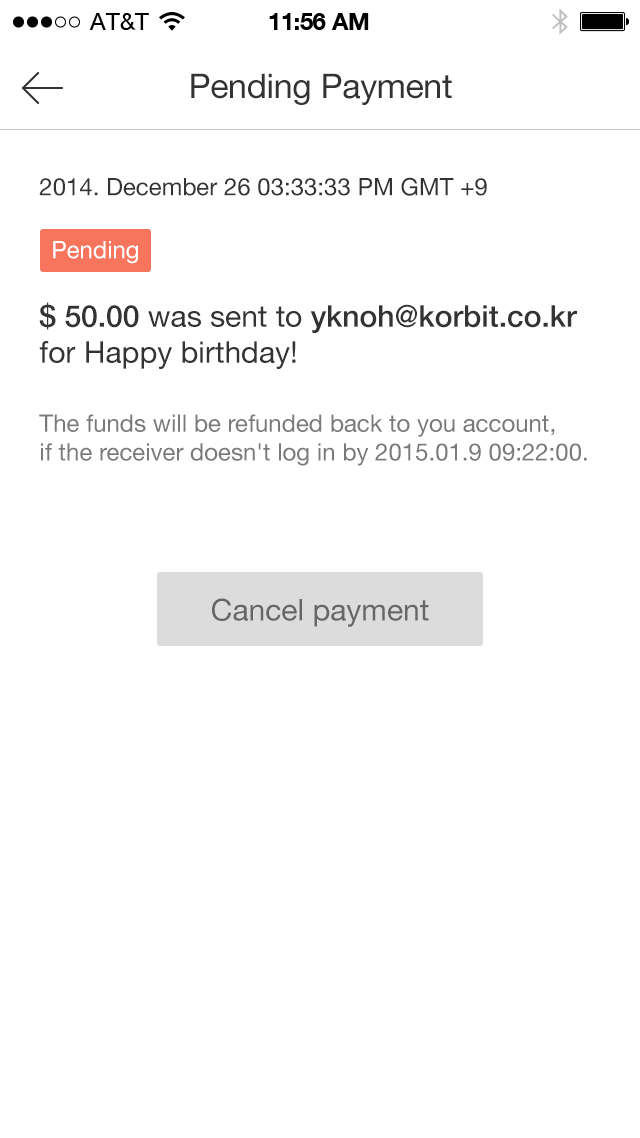
<style>
.page{position:relative;width:640px;height:1138px;background:#ffffff}
.page>*{position:absolute;margin:0}
.t1{font:34px "HelveticaNeue";letter-spacing:-0.01em;color:#333333}
.t2{font:24px "HelveticaNeue";color:#333333}
.t3{font:24px "HelveticaNeue";color:#ffffff}
.t4{font:30px "HelveticaNeue";color:#333333}
.t5{font:30px "HelveticaNeue-Medium";color:#333333}
.t6{font:24px "HelveticaNeue";color:#7a7a7a}
.t7{font:30px "HelveticaNeue";color:#666666}
</style>
<div class="page">
<p class="t1" style="left:191px;top:73px;width:261px;height:32px">Pending Payment</p>
<p class="t2" style="left:39px;top:177px;width:448px;height:19px">2014. December 26 03:33:33 PM GMT +9</p>
<p class="t3" style="left:53px;top:241px;width:85px;height:23px">Pending</p>
<p class="t4" style="left:39px;top:302px;width:538px;height:67px"><span class="t5">$ 50.00 </span>was sent to <span class="t5">yknoh@korbit.co.kr<br></span>for Happy birthday!</p>
<p class="t6" style="left:39px;top:414px;width:548px;height:52px">The funds will be refunded back to you account, <br>if the receiver doesn't log in by 2015.01.9 09:22:00.</p>
<p class="t7" style="left:212px;top:598px;width:217px;height:29px">Cancel payment</p>
</div>
